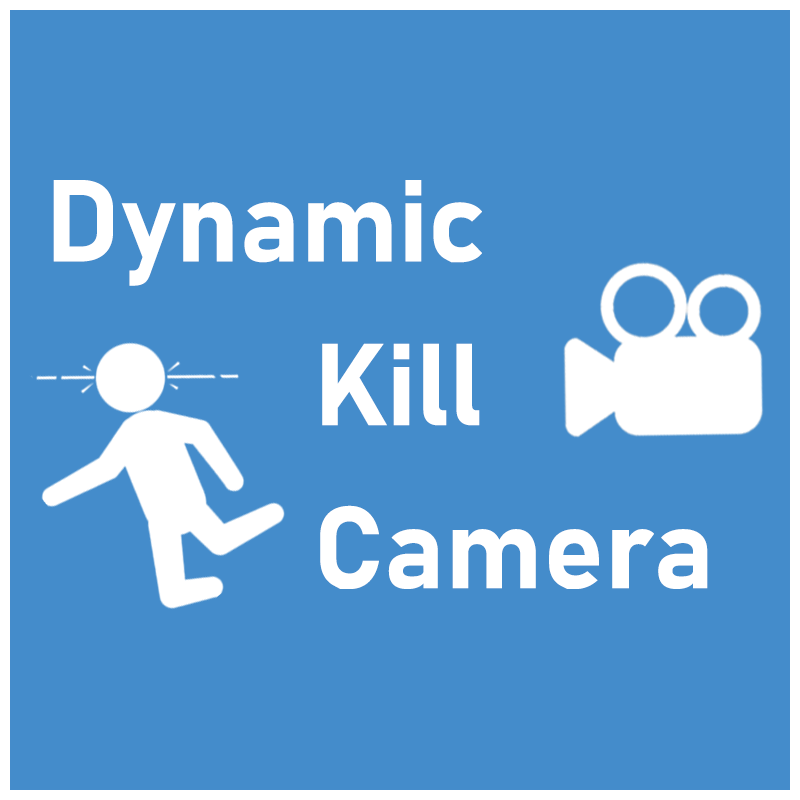
<style>
.page{position:relative;width:800px;height:800px;background:#448ccb}
.page>*{position:absolute;margin:0}
.t1{font:114.6px "Bahnschrift-Bold";color:#ffffff}
</style>
<div class="page">
<p class="t1" style="left:53px;top:180px;width:429px;height:106px">Dynamic</p>
<p class="t1" style="left:322px;top:343px;width:158px;height:83px">Kill</p>
<p class="t1" style="left:320px;top:505px;width:388px;height:84px">Camera</p>
</div>
